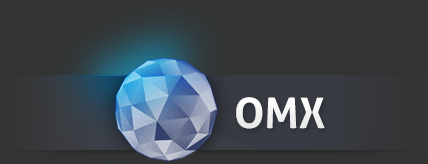
<style>
.page{position:relative;width:428px;height:164px;background:#333333}
.page>*{position:absolute;margin:0}
.t1{font:42px "Aller-Bold";color:#f7f7f7}
</style>
<div class="page">
<p class="t1" style="left:236px;top:97px;width:89px;height:32px">OMX</p>
</div>
